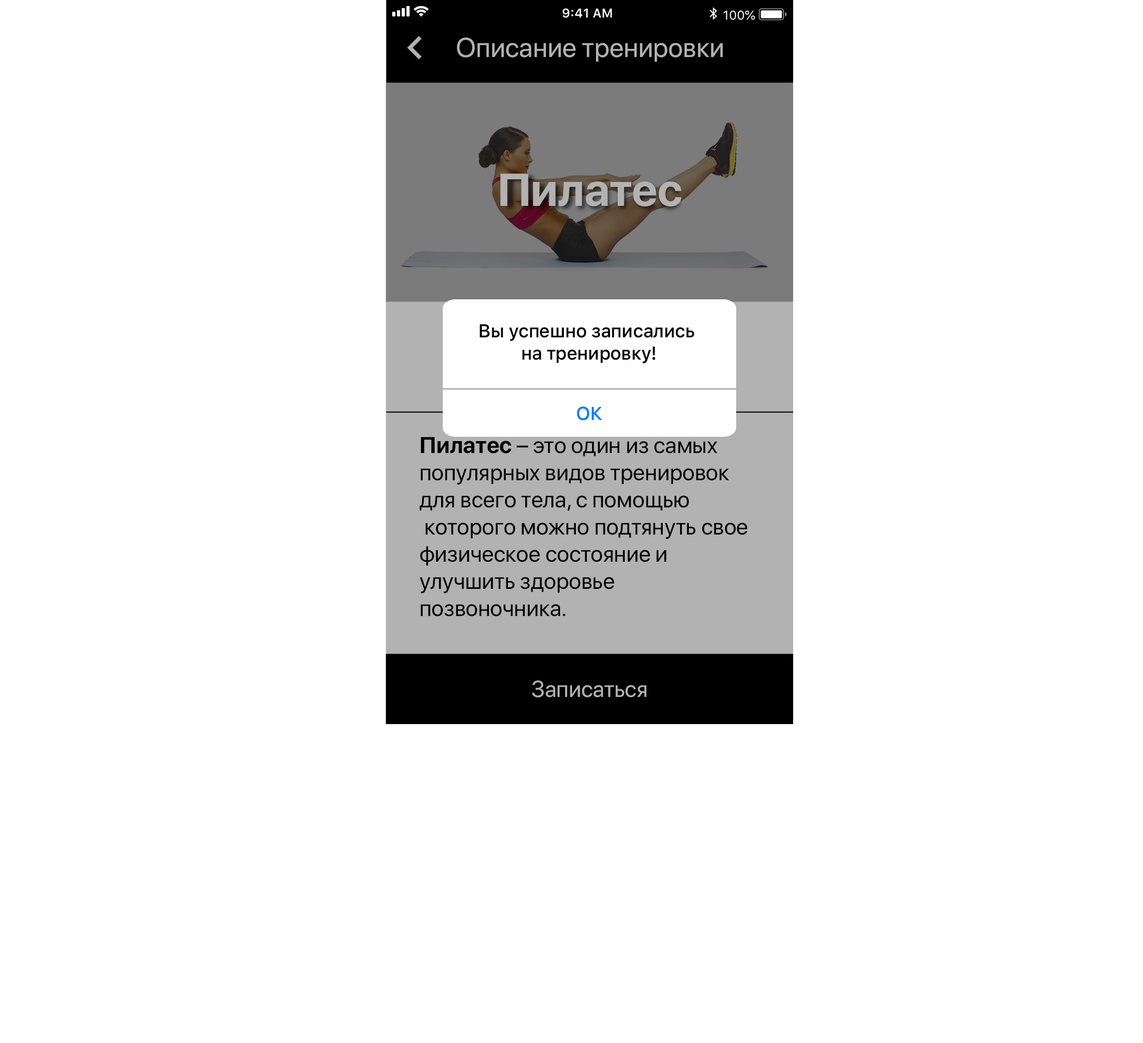
<style>
.page{position:relative;width:1143px;height:1043px;background:#ffffff}
.page>*{position:absolute;margin:0}
.t1{font:27.2px "SFProDisplay-Regular";color:#b2b2b2}
.t2{font:45.6px "SFProDisplay-Bold";color:#b2b2b2}
.t3{font:18.5px "SFProText-Medium";letter-spacing:-0.024em;color:#030303}
.t4{font:18.5px "SFProText-Medium";letter-spacing:-0.024em;color:#007aff}
.t5{font:22.8px/27.2px "SFProDisplay-Regular";color:#000000}
.t6{font:22.8px/27.2px "SFProDisplay-Bold";color:#000000}
.t7{font:22.8px "SFProDisplay-Regular";color:#b2b2b2}
</style>
<div class="page">
<p class="t1" style="left:457px;top:37px;width:266px;height:25px">Описание тренировки</p>
<p class="t2" style="left:500px;top:173px;width:182px;height:33px">Пилатес</p>
<p class="t3" style="left:480px;top:324px;width:214px;height:39px;text-align:center">Вы успешно записались <br>на тренировку!</p>
<p class="t4" style="left:577px;top:406px;width:26px;height:15px">ОК</p>
<p class="t5" style="left:419px;top:437px;width:329px;height:180px"><span class="t6">Пилатес</span> – это один из самых <br>популярных видов тренировок <br>для всего тела, с помощью<br> которого можно подтянуть свое <br>физическое состояние и <br>улучшить здоровье <br>позвоночника.</p>
<p class="t7" style="left:532px;top:680px;width:115px;height:18px">Записаться</p>
</div>
